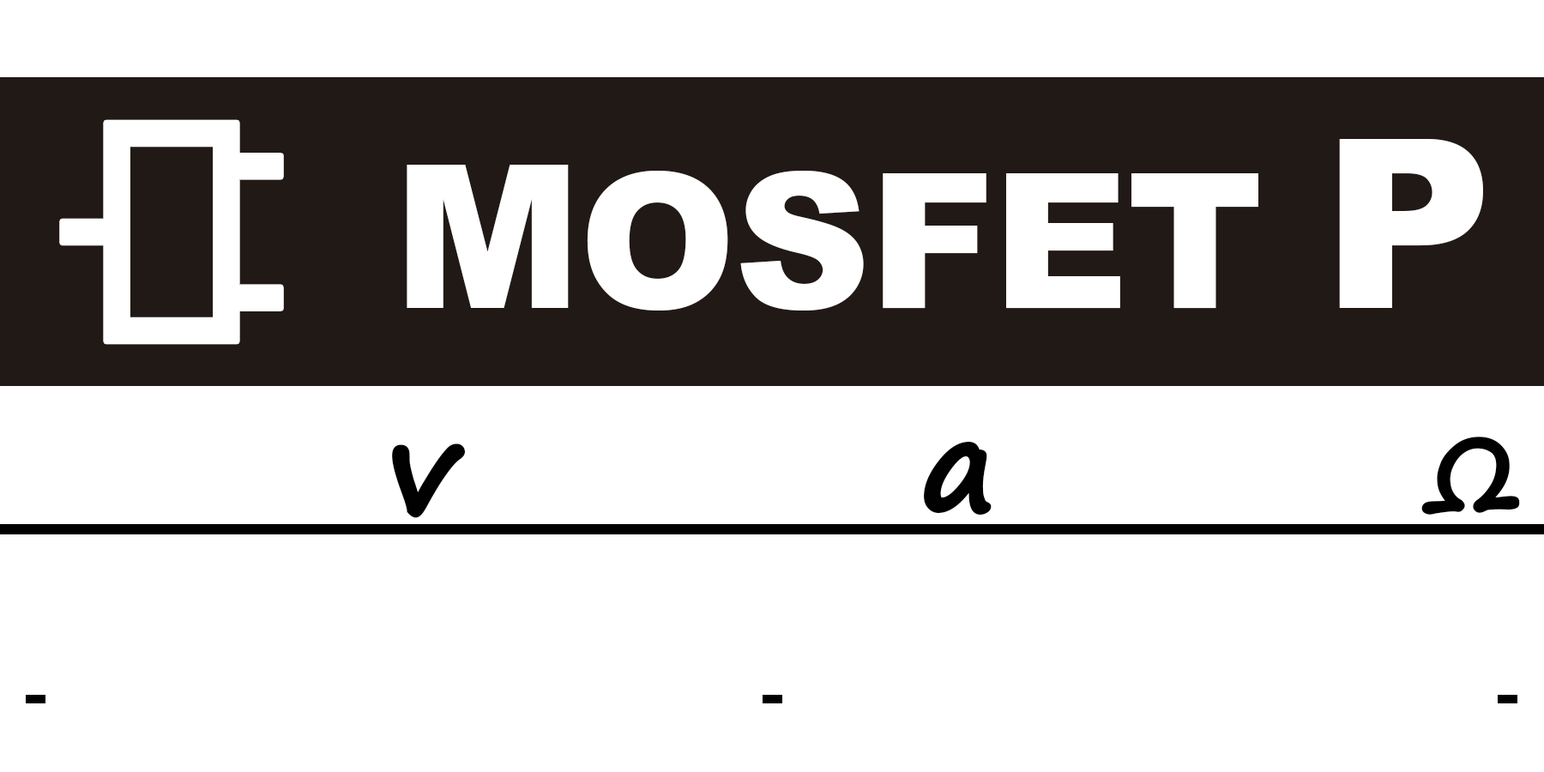
<style>
.page{position:relative;width:1544px;height:772px;background:#ffffff}
.page>*{position:absolute;margin:0}
.t1{font:188.7px "Arial-Black";letter-spacing:-0.01em;color:#ffffff}
.t2{font:199.8px "Arial-Black";letter-spacing:-0.01em;color:#ffffff}
.t3{font:236.1px "Arial-Black";letter-spacing:-0.01em;color:#ffffff}
.t4{font:99.9px "SegoePrint-Bold";letter-spacing:-0.01em;color:#010101;font-weight:bold}
.t5{font:127.1px "Arial-BoldMT";letter-spacing:-0.01em;color:#010101}
.t6{font:127.1px "SegoePrint-Bold";letter-spacing:-0.01em;color:#010101;font-weight:bold}
</style>
<div class="page">
<p class="t1" style="left:407px;top:139px;width:1076px;height:172px"><span class="t2">M</span>OSFET <span class="t3">P</span></p>
<p class="t4" style="left:1422px;top:437px;width:98px;height:78px"><span class="t5"> </span>Ω</p>
<p class="t6" style="left:392px;top:444px;width:74px;height:74px">v</p>
<p class="t6" style="left:924px;top:441px;width:68px;height:75px"><span class="t5">   </span>a</p>
</div>
